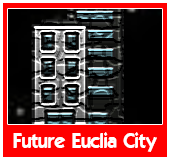
<style>
.page{position:relative;width:170px;height:160px;background:#ff0000}
.page>*{position:absolute;margin:0}
.t1{font:20px "ELEGANCE";color:#ffffff}
</style>
<div class="page">
<p class="t1" style="left:13px;top:132px;width:144px;height:20px">Future Euclia City</p>
</div>
